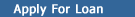
<style>
.page{position:relative;width:135px;height:17px;background:#336699}
.page>*{position:absolute;margin:0}
.t1{font:12px "Tahoma";letter-spacing:0.04em;color:#ffffff;font-weight:bold}
</style>
<div class="page">
<p class="t1" style="left:13px;top:4px;width:90px;height:12px">Apply For Loan</p>
</div>
